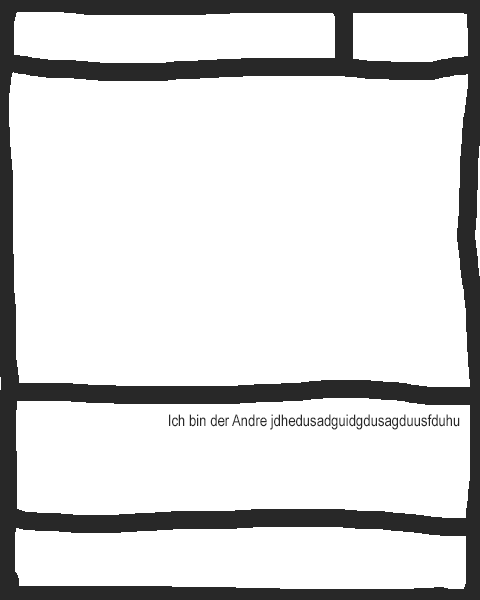
<style>
.page{position:relative;width:480px;height:600px;background:#ffffff}
.page>*{position:absolute;margin:0}
.t1{font:16px "ArialNarrow";color:#282828}
</style>
<div class="page">
<p class="t1" style="left:169px;top:414px;width:291px;height:16px">Ich bin der Andre jdhedusadguidgdusagduusfduhu</p>
</div>
